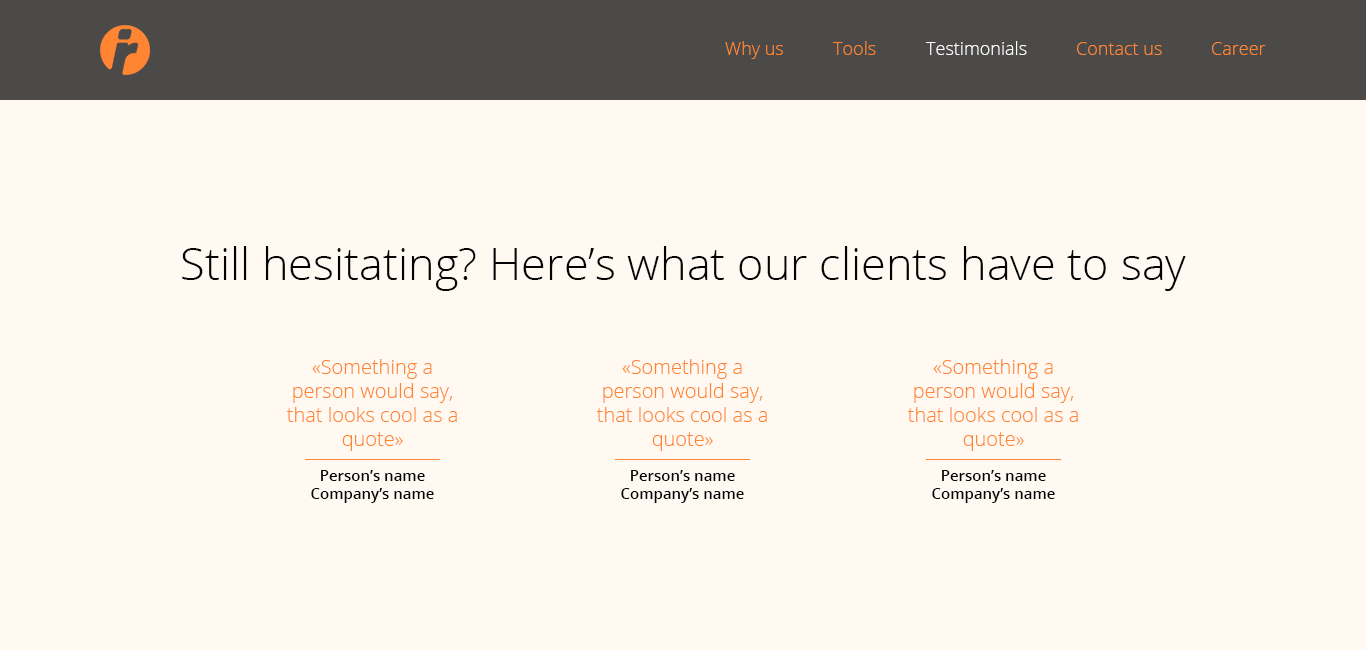
<style>
.page{position:relative;width:1366px;height:650px;background:#fff9f2}
.page>*{position:absolute;margin:0}
.t1{font:18px "OpenSans-Light";color:#ff8533}
.t2{font:18px "OpenSans-Light";color:#fefefe}
.t3{font:45px "OpenSans-Light";color:#030303}
.t4{font:20px "OpenSans-Light";color:#ff8533}
.t5{font:15px "OpenSans-Semibold";color:#030303}
</style>
<div class="page">
<p class="t1" style="left:725px;top:41px;width:58px;height:18px">Why us</p>
<p class="t1" style="left:833px;top:41px;width:43px;height:14px">Tools</p>
<p class="t2" style="left:926px;top:41px;width:101px;height:14px">Testimonials</p>
<p class="t1" style="left:1077px;top:42px;width:85px;height:13px">Contact us</p>
<p class="t1" style="left:1212px;top:42px;width:54px;height:13px">Career</p>
<p class="t3" style="left:182px;top:246px;width:1004px;height:45px">Still hesitating? Here’s what our clients have to say</p>
<p class="t4" style="left:286px;top:359px;width:171px;height:92px;text-align:center">«Something a person would say, that looks cool as a quote»</p>
<p class="t4" style="left:596px;top:359px;width:171px;height:92px;text-align:center">«Something a person would say, that looks cool as a quote»</p>
<p class="t4" style="left:907px;top:359px;width:171px;height:92px;text-align:center">«Something a person would say, that looks cool as a quote»</p>
<p class="t5" style="left:311px;top:470px;width:123px;height:33px;text-align:center">Person’s name<br>Company’s name</p>
<p class="t5" style="left:621px;top:470px;width:123px;height:33px;text-align:center">Person’s name<br>Company’s name</p>
<p class="t5" style="left:932px;top:470px;width:123px;height:33px;text-align:center">Person’s name<br>Company’s name</p>
</div>
